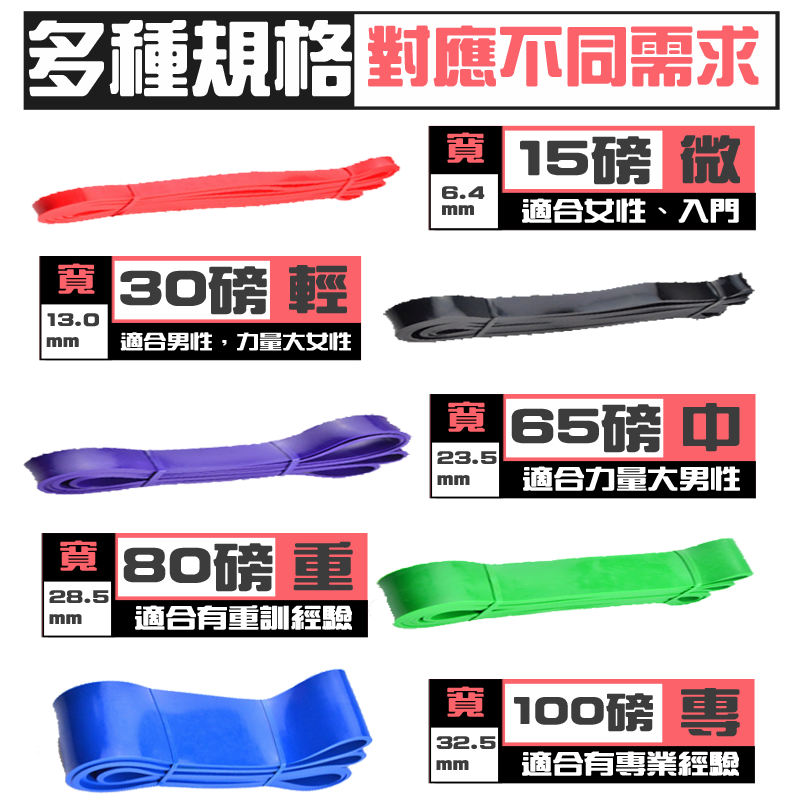
<style>
.page{position:relative;width:800px;height:800px;background:#ffffff}
.page>*{position:absolute;margin:0}
.t1{font:80px "HanWangZonYi";color:#fefefe;font-weight:bold}
.t2{font:64px "HanWangZonYi";color:#fc626a;font-weight:bold}
.t3{font:31.6px "HanWangZonYi";color:#fc626a;font-weight:bold;scale:1.21 1}
.t4{font:50.5px "HanWangZonYi";color:#3c3c3c;font-weight:bold;scale:1.21 1}
.t5{font:18.9px "HanWangZonYi";color:#3c3c3c;font-weight:bold;scale:1.21 1}
.t6{font:25.3px "HanWangZonYi";color:#ffffff;font-weight:bold;scale:1.21 1}
.t7{font:31.6px "HanWangZonYi";color:#fc626a;font-weight:bold;scale:1.19 1}
.t8{font:50.5px "HanWangZonYi";color:#3c3c3c;font-weight:bold;scale:1.19 1}
.t9{font:18.9px "HanWangZonYi";color:#3c3c3c;font-weight:bold;scale:1.19 1}
.t10{font:18.9px "HanWangZonYi";color:#ffffff;font-weight:bold;scale:1.19 1}
.t11{font:40px "HanWangZonYi";color:#3c3c3c;font-weight:bold;scale:1.21 1}
</style>
<div class="page">
<p class="t1" style="left:29px;top:20px;width:323px;height:77px">多種規格</p>
<p class="t2" style="left:368px;top:25px;width:391px;height:62px">對應不同需求</p>
<p class="t3" style="left:447px;top:132px;width:37px;height:31px">寬</p>
<p class="t4" style="left:520px;top:136px;width:131px;height:49px">15磅</p>
<p class="t4" style="left:680px;top:135px;width:60px;height:49px">微</p>
<p class="t5" style="left:442px;top:186px;width:43px;height:29px">6.4<br>mm</p>
<p class="t6" style="left:522px;top:198px;width:217px;height:25px">適合女性、入門</p>
<p class="t7" style="left:58px;top:263px;width:37px;height:31px">寬</p>
<p class="t8" style="left:120px;top:266px;width:147px;height:49px">30磅</p>
<p class="t8" style="left:289px;top:265px;width:58px;height:49px">輕</p>
<p class="t9" style="left:46px;top:313px;width:53px;height:34px">13.0<br>mm</p>
<p class="t10" style="left:120px;top:332px;width:231px;height:19px">適合男性，力量大女性</p>
<p class="t3" style="left:448px;top:401px;width:37px;height:31px">寬</p>
<p class="t4" style="left:511px;top:404px;width:150px;height:49px">65磅</p>
<p class="t4" style="left:683px;top:403px;width:57px;height:49px">中</p>
<p class="t5" style="left:437px;top:451px;width:60px;height:34px">23.5<br>mm</p>
<p class="t6" style="left:523px;top:466px;width:217px;height:25px">適合力量大男性</p>
<p class="t3" style="left:60px;top:540px;width:37px;height:31px">寬</p>
<p class="t4" style="left:123px;top:543px;width:150px;height:49px">80磅</p>
<p class="t4" style="left:293px;top:541px;width:60px;height:50px">重</p>
<p class="t5" style="left:49px;top:590px;width:60px;height:34px">28.5<br>mm</p>
<p class="t6" style="left:135px;top:605px;width:217px;height:25px">適合有重訓經驗</p>
<p class="t3" style="left:447px;top:686px;width:37px;height:31px">寬</p>
<p class="t4" style="left:681px;top:688px;width:59px;height:49px">專</p>
<p class="t11" style="left:514px;top:693px;width:139px;height:39px">100磅</p>
<p class="t5" style="left:436px;top:736px;width:60px;height:34px">32.5<br>mm</p>
<p class="t6" style="left:522px;top:751px;width:217px;height:25px">適合有專業經驗</p>
</div>
